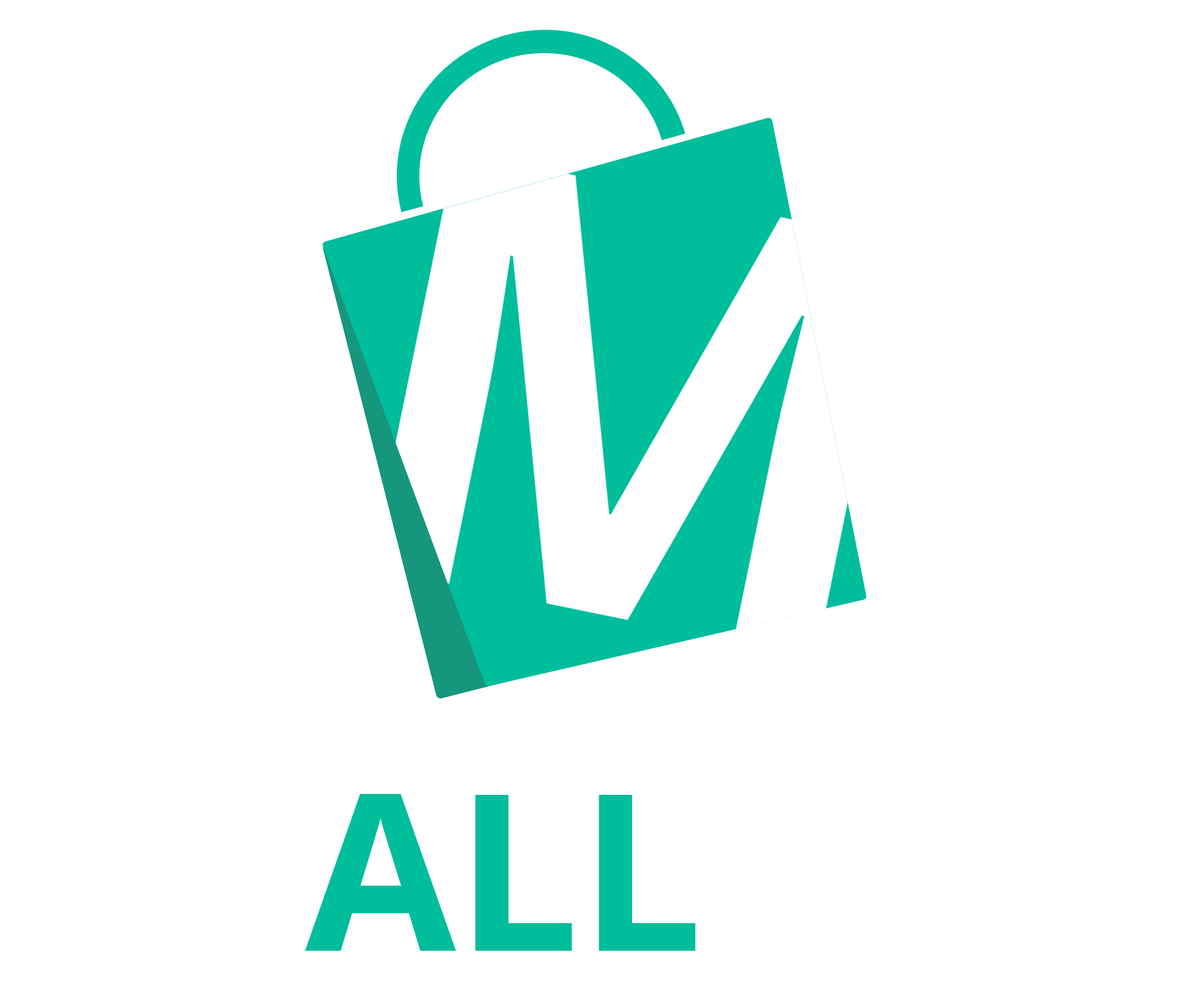
<style>
.page{position:relative;width:1189px;height:1003px;background:#ffffff}
.page>*{position:absolute;margin:0}
.t1{font:218.6px "OpenSans-Bold";color:#00bd9c}
.t2{font:218.6px "OpenSans-Bold";color:#ffffff}
.t3{font:218.6px "OpenSans-SemiBold";color:#ffffff}
</style>
<div class="page">
<p class="t1" style="left:118px;top:792px;width:1006px;height:161px"><span class="t2">M</span>ALL<span class="t3"> 502</span></p>
</div>
